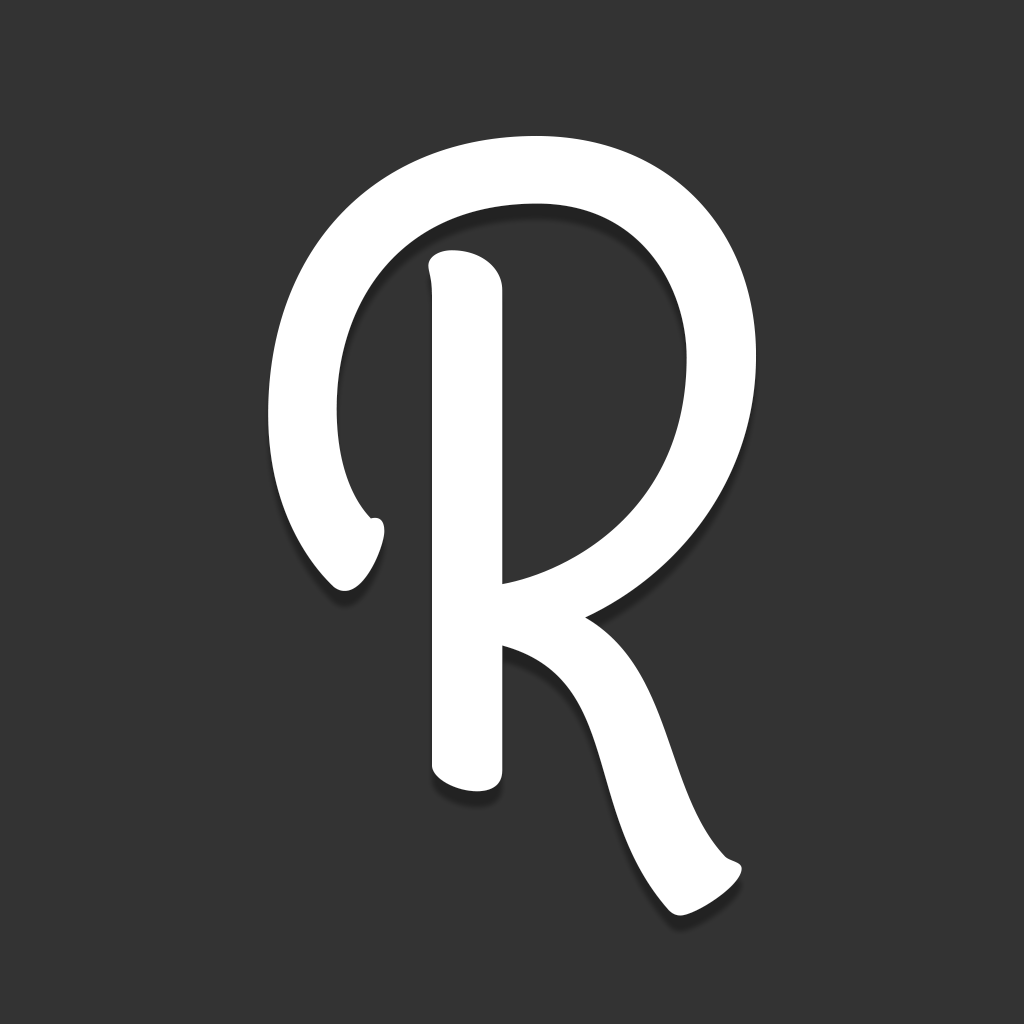
<style>
.page{position:relative;width:1024px;height:1024px;background:#333333}
.page>*{position:absolute;margin:0}
.t1{font:900px "GrandHotel-Regular";color:#ffffff}
</style>
<div class="page">
<p class="t1" style="left:268px;top:135px;width:489px;height:781px">R</p>
</div>
